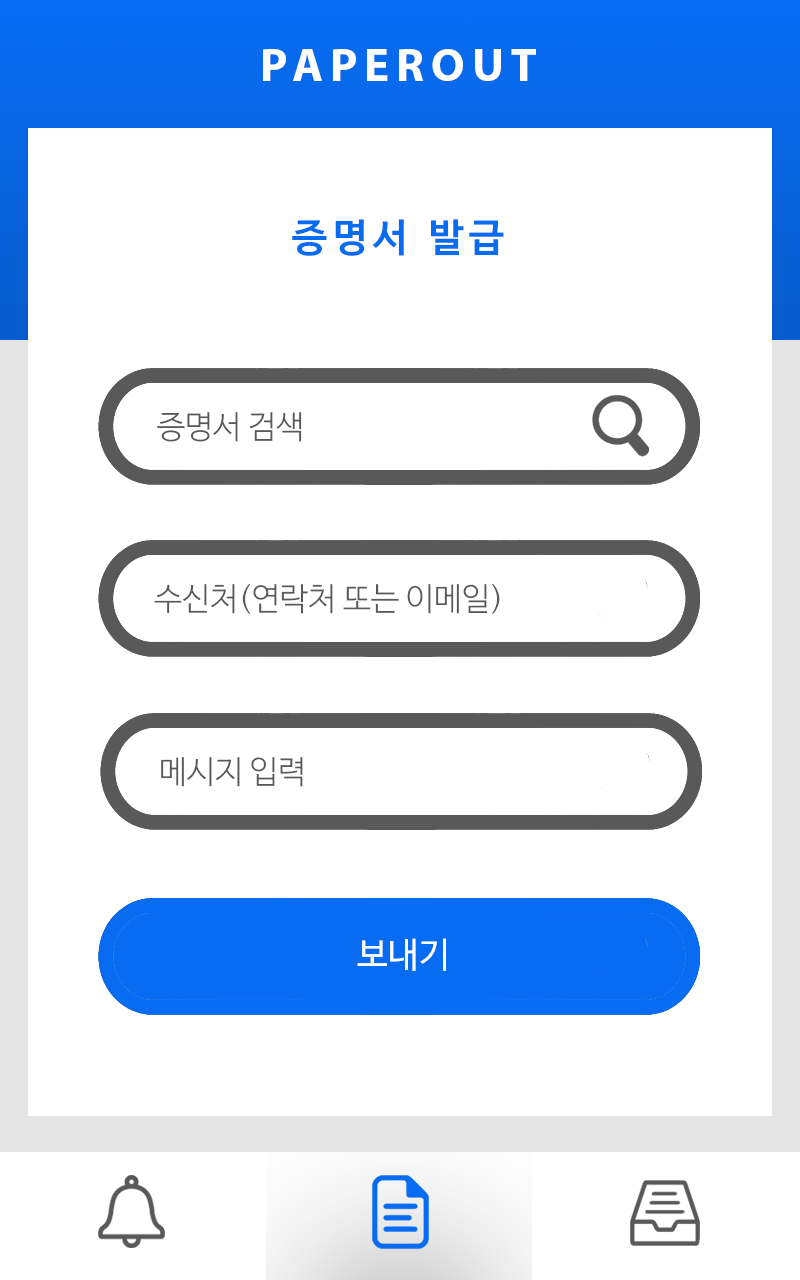
<style>
.page{position:relative;width:800px;height:1280px;background:#ffffff}
.page>*{position:absolute;margin:0}
.t1{font:46.9px "MyriadPro-Bold";letter-spacing:0.15em;color:#ffffff}
.t2{font:39px "NanumBarunGothicOTFBold";letter-spacing:0.15em;color:#076cf2}
.t3{font:31.8px "NanumBarunGothicOTFLight";color:#595959}
.t4{font:35px "NanumBarunGothicOTF";color:#ffffff}
</style>
<div class="page">
<p class="t1" style="left:263px;top:49px;width:273px;height:32px">PAPEROUT</p>
<p class="t2" style="left:292px;top:219px;width:212px;height:37px">증명서 발급</p>
<p class="t3" style="left:157px;top:412px;width:145px;height:30px">증명서 검색</p>
<p class="t3" style="left:154px;top:584px;width:346px;height:30px">수신처(연락처 또는 이메일)</p>
<p class="t3" style="left:161px;top:757px;width:142px;height:30px">메시지 입력</p>
<p class="t4" style="left:357px;top:938px;width:89px;height:33px">보내기</p>
</div>
